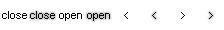
<style>
.page{position:relative;width:224px;height:30px;background:#ffffff}
.page>*{position:absolute;margin:0}
.t1{font:11px "ArialMT";color:#000000;scale:0.96 1}
.t2{font:14px "Courier";color:#000000;scale:0.96 1}
.t3{font:11px "Courier";color:#000000;scale:0.96 1}
</style>
<div class="page">
<p class="t1" style="left:2px;top:11px;width:25px;height:8px">close</p>
<p class="t1" style="left:30px;top:11px;width:25px;height:8px">close</p>
<p class="t1" style="left:59px;top:13px;width:23px;height:8px">open</p>
<p class="t1" style="left:87px;top:13px;width:23px;height:8px">open</p>
<p class="t2" style="left:124px;top:12px;width:4px;height:7px">&lt;</p>
<p class="t3" style="left:152px;top:12px;width:4px;height:7px">&lt;</p>
<p class="t2" style="left:181px;top:12px;width:4px;height:7px">&gt;</p>
<p class="t3" style="left:209px;top:12px;width:4px;height:7px">&gt;</p>
</div>
